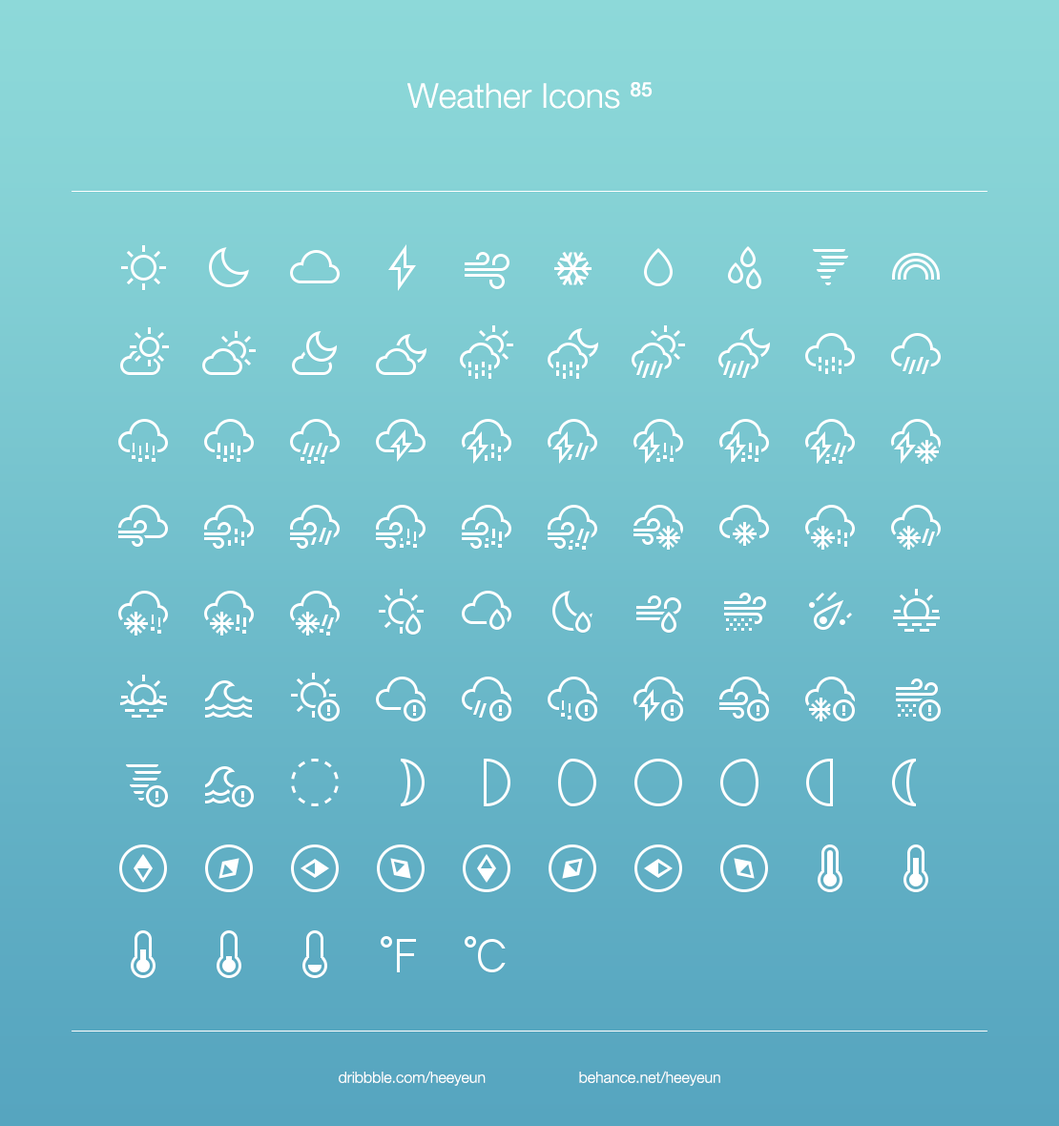
<style>
.page{position:relative;width:1059px;height:1126px}
.page>*{position:absolute;margin:0}
.t1{font:34.3px "HelveticaNeue-Light";color:#ffffff}
.t2{font:34.3px "HelveticaNeue-Medium";color:#ffffff}
.t3{font:15.3px "HelveticaNeue-Light";color:#ffffff}
</style>
<div class="page">
<p class="t1" style="left:407px;top:82px;width:246px;height:27px">Weather Icons <span class="t2">85</span></p>
<p class="t3" style="left:339px;top:1071px;width:381px;height:15px">dribbble.com/heeyeun   behance.net/heeyeun</p>
</div>
